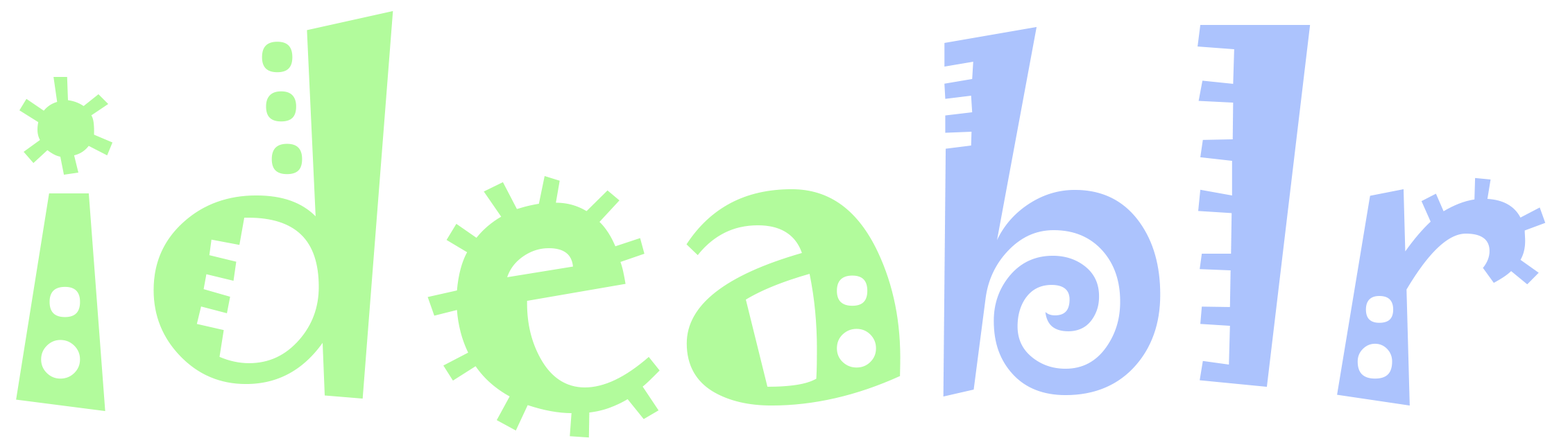
<style>
.page{position:relative;width:1568px;height:445px;background:#ffffff}
.page>*{position:absolute;margin:0}
.t1{font:433.6px "Jokerman-Regular";color:#b2fb9c}
.t2{font:433.6px "Jokerman-Regular";color:#acc3fd}
</style>
<div class="page">
<p class="t1" style="left:16px;top:11px;width:1530px;height:427px">idea<span class="t2">blr</span></p>
</div>
